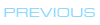
<style>
.page{position:relative;width:100px;height:25px;background:#ffffff}
.page>*{position:absolute;margin:0}
.t1{font:14px "MicrogrammaD-MediExte";letter-spacing:0.075em;color:#8dd9ff}
</style>
<div class="page">
<p class="t1" style="left:4px;top:8px;width:91px;height:9px">PREVIOUS</p>
</div>
